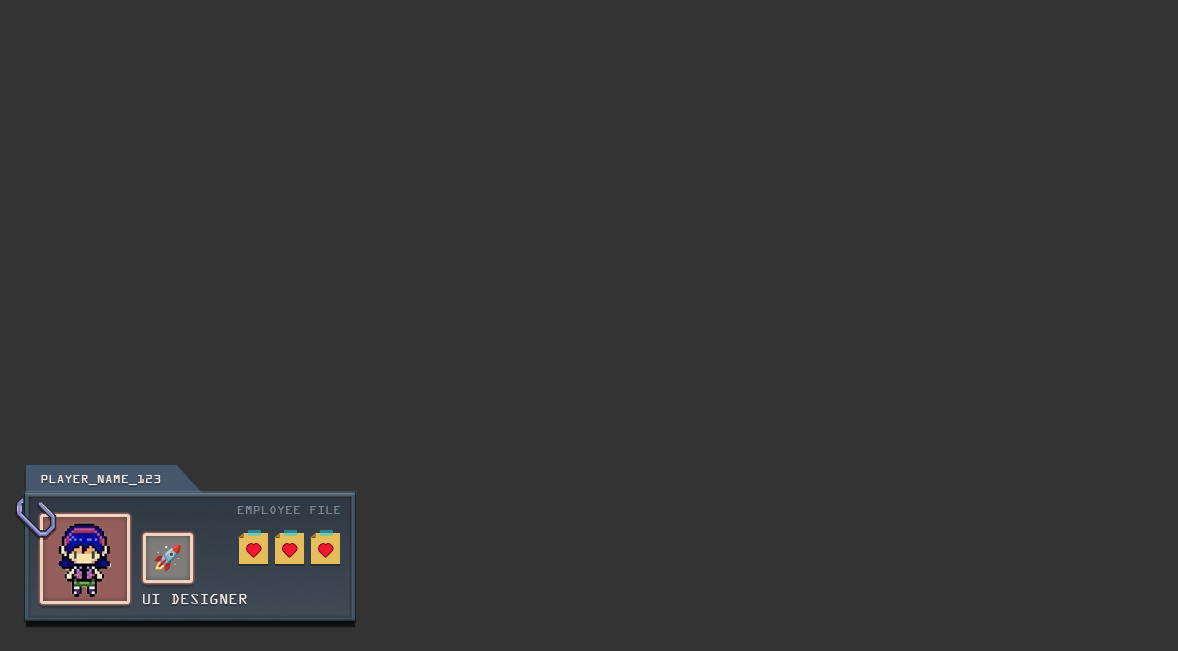
<style>
.page{position:relative;width:1178px;height:651px;background:#333333}
.page>*{position:absolute;margin:0}
.t1{font:13.3px "OCRAExtended";color:#f5ebe1;text-transform:uppercase}
.t2{font:13.3px "OCRAExtended";color:#778692;text-transform:uppercase}
.t3{font:16px "OCRAExtended";color:#f5ebe1;text-transform:uppercase}
</style>
<div class="page">
<p class="t1" style="left:41px;top:475px;width:120px;height:10px">Player_name_123</p>
<p class="t2" style="left:237px;top:506px;width:104px;height:8px">Employee file</p>
<p class="t3" style="left:143px;top:594px;width:104px;height:10px">ui designer</p>
</div>
